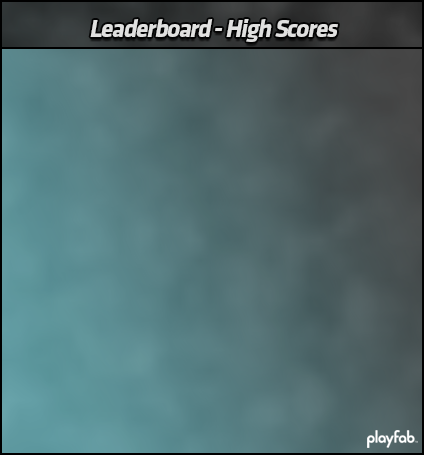
<style>
.page{position:relative;width:424px;height:455px}
.page>*{position:absolute;margin:0}
.t1{font:25.4px "Klavika-Bold";letter-spacing:-0.05em;color:#f0f0ef;font-style:italic}
</style>
<div class="page">
<p class="t1" style="left:90px;top:19px;width:248px;height:23px;opacity:0.89">Leaderboard - High Scores</p>
</div>
